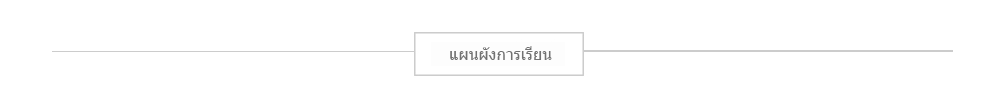
<style>
.page{position:relative;width:1000px;height:100px;background:#ffffff}
.page>*{position:absolute;margin:0}
.t1{font:16.7px "Tahoma";color:#727272;scale:0.96 1}
</style>
<div class="page">
<p class="t1" style="left:450px;top:46px;width:102px;height:14px">แผนผังการเรียน</p>
</div>
